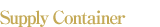
<style>
.page{position:relative;width:160px;height:27px;background:#ffffff}
.page>*{position:absolute;margin:0}
.t1{font:18px "RyuminPro-ExBold";letter-spacing:-0.08em;color:#c4a956}
</style>
<div class="page">
<p class="t1" style="left:0px;top:10px;width:126px;height:17px">Supply Container</p>
</div>
